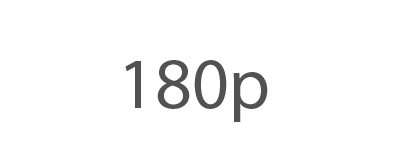
<style>
.page{position:relative;width:396px;height:162px;background:#ffffff}
.page>*{position:absolute;margin:0}
.t1{font:72px "MyriadPro-Regular";color:#525252}
</style>
<div class="page">
<p class="t1" style="left:125px;top:60px;width:143px;height:62px">180p</p>
</div>
